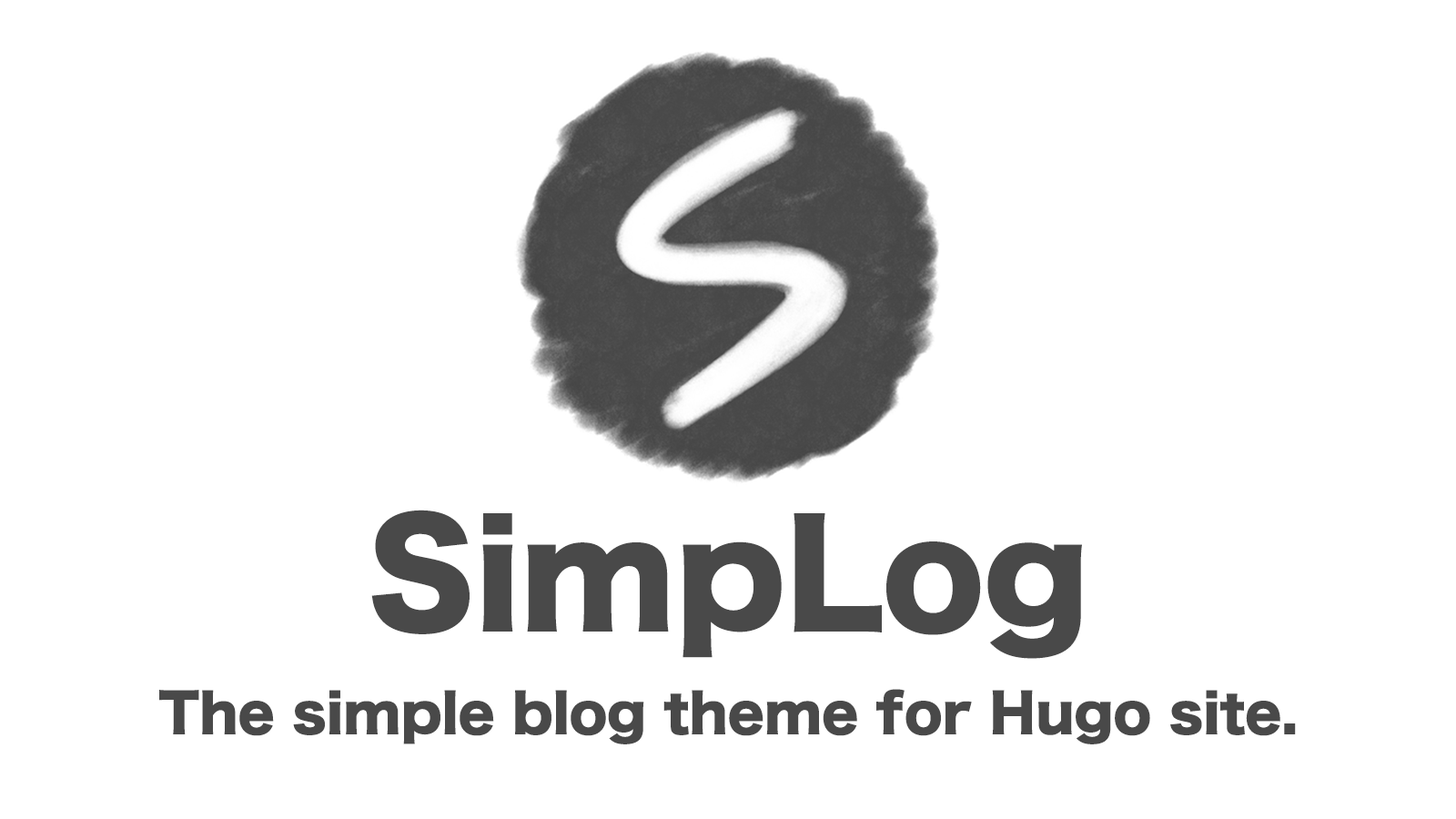
<style>
.page{position:relative;width:1456px;height:819px;background:#ffffff}
.page>*{position:absolute;margin:0}
.t1{font:52.8px/105.6px "HiraKakuStd-W8";color:#494949}
.t2{font:142px/107.4px "HiraKakuStd-W8";color:#494949}
</style>
<div class="page">
<p class="t1" style="left:159px;top:510px;width:1137px;height:234px;text-align:center"><span class="t2">SimpLog<br></span>The simple blog theme for Hugo site.</p>
</div>
